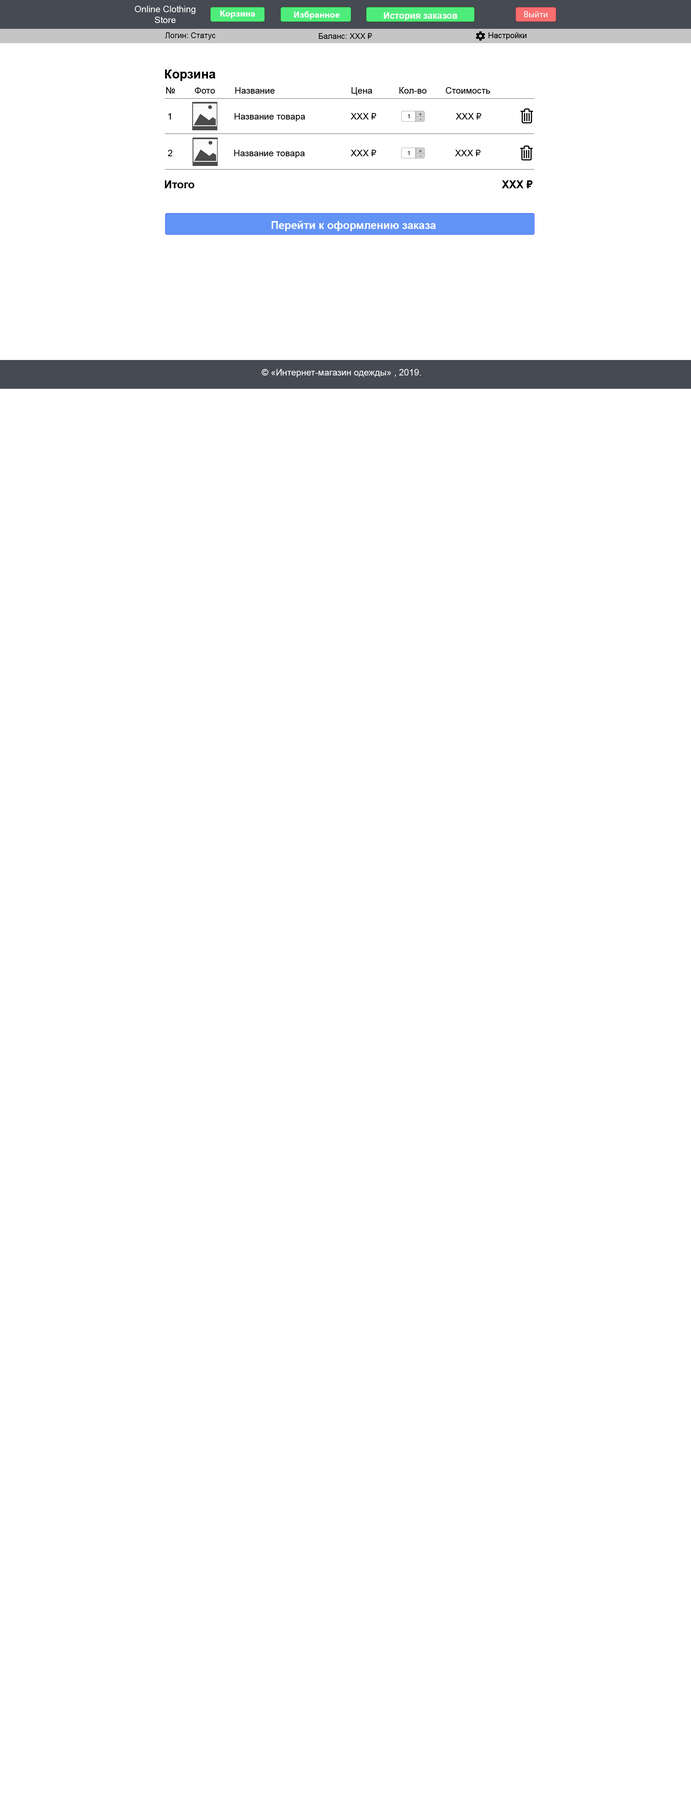
<style>
.page{position:relative;width:691px;height:1800px;background:#ffffff}
.page>*{position:absolute;margin:0}
.t1{font:9px "ArialMT";color:#ffffff}
.t2{font:7.9px "ArialMT";color:#000000}
.t3{font:12.6px "Arial-BoldMT";color:#000000}
.t4{font:9px "ArialMT";color:#000000}
.t5{font:10.8px "Arial-BoldMT";color:#000000}
</style>
<div class="page">
<p class="t1" style="left:135px;top:6px;width:60px;height:17px;text-align:center">Online Clothing<br>Store</p>
<p class="t2" style="left:165px;top:32px;width:51px;height:8px">Логин: Статус</p>
<p class="t2" style="left:319px;top:33px;width:53px;height:6px">Баланс: XXX ₽</p>
<p class="t3" style="left:165px;top:69px;width:51px;height:12px">Корзина</p>
<p class="t4" style="left:166px;top:87px;width:9px;height:7px">№</p>
<p class="t4" style="left:195px;top:87px;width:20px;height:7px">Фото</p>
<p class="t4" style="left:235px;top:87px;width:40px;height:7px">Название</p>
<p class="t4" style="left:352px;top:87px;width:20px;height:8px">Цена</p>
<p class="t4" style="left:400px;top:87px;width:27px;height:7px">Кол-во</p>
<p class="t4" style="left:446px;top:87px;width:44px;height:7px">Стоимость</p>
<p class="t4" style="left:168px;top:113px;width:3px;height:7px">1</p>
<p class="t4" style="left:235px;top:113px;width:70px;height:8px">Название товара</p>
<p class="t4" style="left:351px;top:113px;width:25px;height:7px">XXX ₽</p>
<p class="t4" style="left:456px;top:113px;width:25px;height:7px">XXX ₽</p>
<p class="t4" style="left:168px;top:150px;width:4px;height:6px">2</p>
<p class="t4" style="left:234px;top:150px;width:71px;height:8px">Название товара</p>
<p class="t4" style="left:351px;top:150px;width:25px;height:6px">XXX ₽</p>
<p class="t4" style="left:455px;top:150px;width:26px;height:6px">XXX ₽</p>
<p class="t5" style="left:165px;top:180px;width:29px;height:8px">Итого</p>
<p class="t5" style="left:502px;top:180px;width:31px;height:8px">XXX ₽</p>
<p class="t1" style="left:262px;top:369px;width:159px;height:8px">© «Интернет-магазин одежды» , 2019.</p>
</div>
